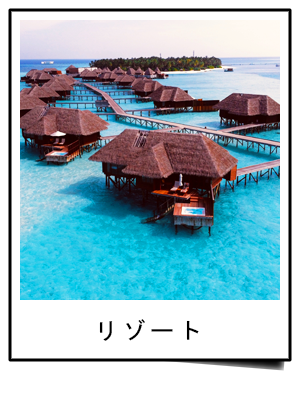
<style>
.page{position:relative;width:300px;height:400px;background:#ffffff}
.page>*{position:absolute;margin:0}
.t1{font:24px "MS-Gothic";letter-spacing:0.16em;color:#000000}
</style>
<div class="page">
<p class="t1" style="left:99px;top:319px;width:100px;height:22px">リゾート</p>
</div>
